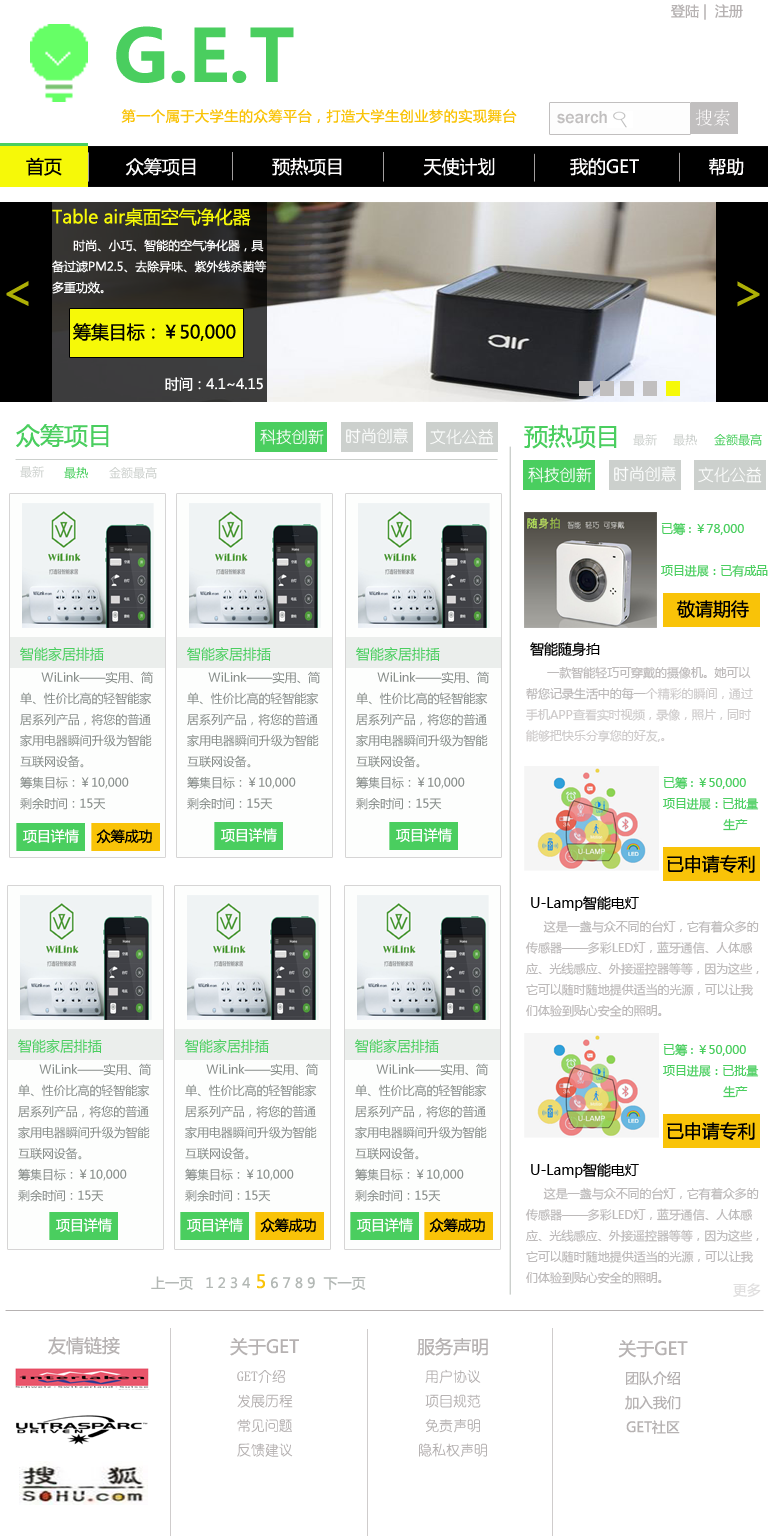
<style>
.page{position:relative;width:768px;height:1536px;background:#ffffff}
.page>*{position:absolute;margin:0}
.t1{font:14px "MicrosoftYaHei";color:#b6b2b2}
.t2{font:72px "MicrosoftYaHei-Bold";color:#4ace5f}
.t3{font:14px "MicrosoftYaHei";letter-spacing:0.05em;color:#f9c308}
.t4{font:18px "FranklinGothic-Medium";color:#c1bfbf}
.t5{font:18px "NSimSun";color:#fdfbfb}
.t6{font:18px "MicrosoftYaHei";color:#fefdfd}
.t7{font:18px "MicrosoftYaHei";color:#010101}
.t8{font:12px "MicrosoftYaHei";color:#fefefe}
.t9{font:18px "MicrosoftYaHei";color:#f6f908}
.t10{font:12px/60.1px "MicrosoftYaHei";color:#fefefe}
.t11{font:48px "MicrosoftYaHei";color:#adaf06}
.t12{font:18px "MicrosoftYaHei";color:#000000}
.t13{font:14px "MicrosoftYaHei";color:#fefefe}
.t14{font:24px "MicrosoftYaHei";color:#4ace5f}
.t15{font:16px "YouYuan";color:#fdfefd}
.t16{font:12px "MicrosoftYaHei";color:#ccd0cd}
.t17{font:12px "MicrosoftYaHei";color:#4ace5f}
.t18{font:12px "MicrosoftYaHei";color:#878d8a}
.t19{font:14px "MicrosoftYaHei";color:#4ace5f}
.t20{font:12px "MicrosoftYaHei";color:#cfcccc}
.t21{font:14px "MicrosoftYaHei";color:#000000}
.t22{font:12px "MicrosoftYaHei";color:#bdbaba}
.t23{font:14px "MicrosoftYaHei";color:#b3b8b5}
.t24{font:18px "MicrosoftYaHei";color:#f9c308}
.t25{font:14px "MicrosoftYaHei";color:#e0dfdf}
.t26{font:18px "MicrosoftYaHei";color:#b6b2b2}
.t27{font:14px "YouYuan";color:#b6b2b2}
</style>
<div class="page">
<p class="t1" style="left:671px;top:4px;width:72px;height:16px">登陆 |  注册</p>
<p class="t2" style="left:116px;top:26px;width:178px;height:57px">G.E.T</p>
<p class="t3" style="left:121px;top:109px;width:396px;height:14px">第一个属于大学生的众筹平台，打造大学生创业梦的实现舞台</p>
<p class="t4" style="left:557px;top:111px;width:50px;height:13px">search</p>
<p class="t5" style="left:695px;top:109px;width:35px;height:17px">搜索</p>
<p class="t6" style="left:26px;top:157px;width:718px;height:19px"><span class="t7">首页</span>            众筹项目              预热项目               天使计划              我的GET             帮助</p>
<p class="t8" style="left:52px;top:208px;width:215px;height:86px"><span class="t9">Table air桌面空气净化器<br></span>      时尚、小巧、智能的空气净化器，具备过滤PM2.5、去除异味、紫外线杀菌等<span class="t10">多重功效。</span></p>
<p class="t11" style="left:6px;top:281px;width:23px;height:25px">&lt;</p>
<p class="t11" style="left:737px;top:281px;width:23px;height:26px">&gt;</p>
<p class="t12" style="left:73px;top:323px;width:163px;height:18px">筹集目标：￥50,000</p>
<p class="t13" style="left:165px;top:377px;width:98px;height:14px">时间：4.1~4.15</p>
<p class="t14" style="left:16px;top:424px;width:93px;height:24px">众筹项目</p>
<p class="t14" style="left:524px;top:424px;width:93px;height:25px">预热项目</p>
<p class="t15" style="left:260px;top:429px;width:64px;height:16px">科技创新</p>
<p class="t15" style="left:346px;top:427px;width:62px;height:17px">时尚创意</p>
<p class="t15" style="left:430px;top:429px;width:64px;height:16px">文化公益</p>
<p class="t16" style="left:633px;top:434px;width:24px;height:12px">最新</p>
<p class="t16" style="left:673px;top:434px;width:24px;height:12px">最热</p>
<p class="t17" style="left:714px;top:433px;width:48px;height:13px">金额最高</p>
<p class="t16" style="left:20px;top:466px;width:24px;height:12px">最新</p>
<p class="t17" style="left:64px;top:467px;width:24px;height:12px">最热</p>
<p class="t16" style="left:109px;top:466px;width:48px;height:13px">金额最高</p>
<p class="t15" style="left:528px;top:467px;width:64px;height:16px">科技创新</p>
<p class="t15" style="left:614px;top:465px;width:62px;height:17px">时尚创意</p>
<p class="t15" style="left:698px;top:467px;width:64px;height:16px">文化公益</p>
<p class="t17" style="left:661px;top:522px;width:107px;height:55px">已筹 : ￥78,000<br><br>项目进展：已有成品</p>
<p class="t12" style="left:677px;top:600px;width:72px;height:18px">敬请期待</p>
<p class="t18" style="left:20px;top:647px;width:133px;height:163px"><span class="t19">智能家居排插<br>      </span>WiLink——实用、简<br>单、性价比高的轻智能家<br>居系列产品，将您的普通<br>家用电器瞬间升级为智能<br>互联网设备。<br>筹集目标：￥10,000<br>剩余时间：15天</p>
<p class="t18" style="left:187px;top:647px;width:133px;height:163px"><span class="t19">智能家居排插<br>      </span>WiLink——实用、简<br>单、性价比高的轻智能家<br>居系列产品，将您的普通<br>家用电器瞬间升级为智能<br>互联网设备。<br>筹集目标：￥10,000<br>剩余时间：15天</p>
<p class="t18" style="left:356px;top:647px;width:133px;height:163px"><span class="t19">智能家居排插<br>      </span>WiLink——实用、简<br>单、性价比高的轻智能家<br>居系列产品，将您的普通<br>家用电器瞬间升级为智能<br>互联网设备。<br>筹集目标：￥10,000<br>剩余时间：15天</p>
<p class="t20" style="left:526px;top:642px;width:227px;height:100px"><span class="t21"> 智能随身拍<br></span><span class="t22">      一款智能轻巧可穿戴的摄像机。她可以<br>帮您记录生活中的每一</span>个精彩的瞬间，通过<br>手机APP查看实时视频，录像，照片，同时<br>能够把快乐分享您的好友,。</p>
<p class="t17" style="left:663px;top:776px;width:96px;height:55px">已筹 : ￥50,000<br>项目进展：已批量<br>                 生产</p>
<p class="t13" style="left:23px;top:829px;width:56px;height:15px">项目详情</p>
<p class="t21" style="left:96px;top:829px;width:56px;height:15px">众筹成功</p>
<p class="t13" style="left:221px;top:828px;width:56px;height:15px">项目详情</p>
<p class="t13" style="left:396px;top:828px;width:56px;height:15px">项目详情</p>
<p class="t12" style="left:667px;top:855px;width:88px;height:18px">已申请专利</p>
<p class="t22" style="left:525px;top:896px;width:234px;height:121px"><span class="t21"> U-Lamp智能电灯<br></span>     这是一盏与众不同的台灯，它有着众多的<br>传感器——多彩LED灯，蓝牙通信、人体感<br>应、光线感应、外接遥控器等等，因为这些，<br>它可以随时随地提供适当的光源，可以让我<br>们体验到贴心安全的照明。</p>
<p class="t18" style="left:18px;top:1039px;width:133px;height:163px"><span class="t19">智能家居排插<br>      </span>WiLink——实用、简<br>单、性价比高的轻智能家<br>居系列产品，将您的普通<br>家用电器瞬间升级为智能<br>互联网设备。<br>筹集目标：￥10,000<br>剩余时间：15天</p>
<p class="t18" style="left:185px;top:1039px;width:133px;height:163px"><span class="t19">智能家居排插<br>      </span>WiLink——实用、简<br>单、性价比高的轻智能家<br>居系列产品，将您的普通<br>家用电器瞬间升级为智能<br>互联网设备。<br>筹集目标：￥10,000<br>剩余时间：15天</p>
<p class="t18" style="left:355px;top:1039px;width:133px;height:163px"><span class="t19">智能家居排插<br>      </span>WiLink——实用、简<br>单、性价比高的轻智能家<br>居系列产品，将您的普通<br>家用电器瞬间升级为智能<br>互联网设备。<br>筹集目标：￥10,000<br>剩余时间：15天</p>
<p class="t17" style="left:663px;top:1043px;width:96px;height:55px">已筹 : ￥50,000<br>项目进展：已批量<br>                 生产</p>
<p class="t12" style="left:667px;top:1122px;width:88px;height:18px">已申请专利</p>
<p class="t22" style="left:525px;top:1163px;width:234px;height:121px"><span class="t21"> U-Lamp智能电灯<br></span>     这是一盏与众不同的台灯，它有着众多的<br>传感器——多彩LED灯，蓝牙通信、人体感<br>应、光线感应、外接遥控器等等，因为这些，<br>它可以随时随地提供适当的光源，可以让我<br>们体验到贴心安全的照明。</p>
<p class="t13" style="left:56px;top:1218px;width:56px;height:15px">项目详情</p>
<p class="t13" style="left:187px;top:1218px;width:56px;height:15px">项目详情</p>
<p class="t21" style="left:260px;top:1218px;width:56px;height:15px">众筹成功</p>
<p class="t13" style="left:357px;top:1218px;width:56px;height:15px">项目详情</p>
<p class="t21" style="left:429px;top:1218px;width:56px;height:15px">众筹成功</p>
<p class="t23" style="left:151px;top:1274px;width:215px;height:16px">上一页   1 2 3 4<span class="t24"> 5</span> 6 7 8 9  下一页</p>
<p class="t25" style="left:733px;top:1283px;width:28px;height:14px">更多</p>
<p class="t26" style="left:48px;top:1336px;width:72px;height:19px">友情链接</p>
<p class="t27" style="left:417px;top:1337px;width:71px;height:120px;text-align:center"><span class="t26">服务声明<br></span>用户协议<br>项目规范<br>免责声明<br>隐私权声明</p>
<p class="t27" style="left:230px;top:1338px;width:69px;height:119px"><span class="t26">关于GET<br></span> GET介绍<br> 发展历程<br> 常见问题<br> 反馈建议</p>
<p class="t1" style="left:618px;top:1340px;width:70px;height:94px;text-align:center"><span class="t26">关于GET<br></span>团队介绍<br>加入我们<br>GET社区</p>
</div>
